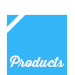
<style>
.page{position:relative;width:75px;height:75px;background:#34b5f7}
.page>*{position:absolute;margin:0}
.t1{font:13.5px "ThirstyScript-Bold";color:#f6f6f6}
</style>
<div class="page">
<p class="t1" style="left:10px;top:55px;width:55px;height:12px">Products</p>
</div>
